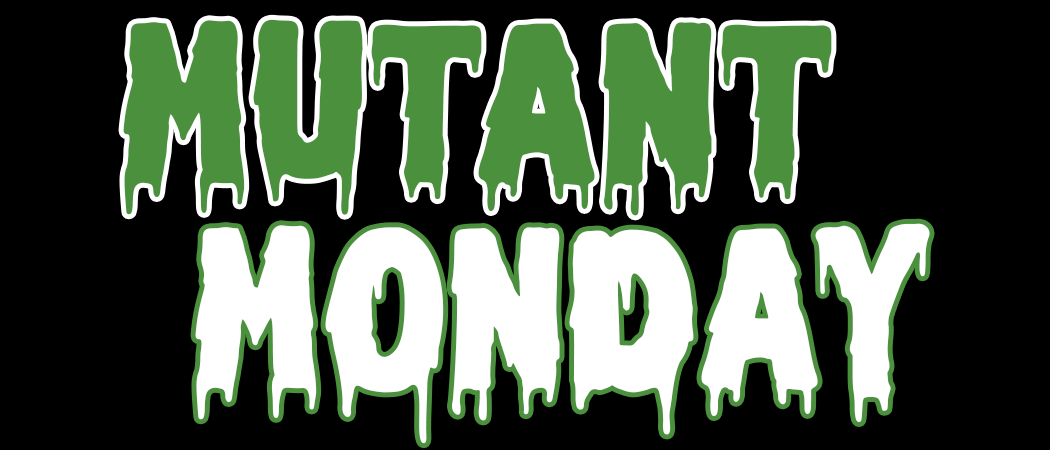
<style>
.page{position:relative;width:1050px;height:450px;background:#000000}
.page>*{position:absolute;margin:0}
.t1{font:230px "MeltedMonster";color:#4b913d}
.t2{font:230px "MeltedMonster";color:#ffffff}
</style>
<div class="page">
<p class="t1" style="left:123px;top:19px;width:709px;height:197px">Mutant</p>
<p class="t2" style="left:195px;top:223px;width:735px;height:221px">Monday</p>
</div>
